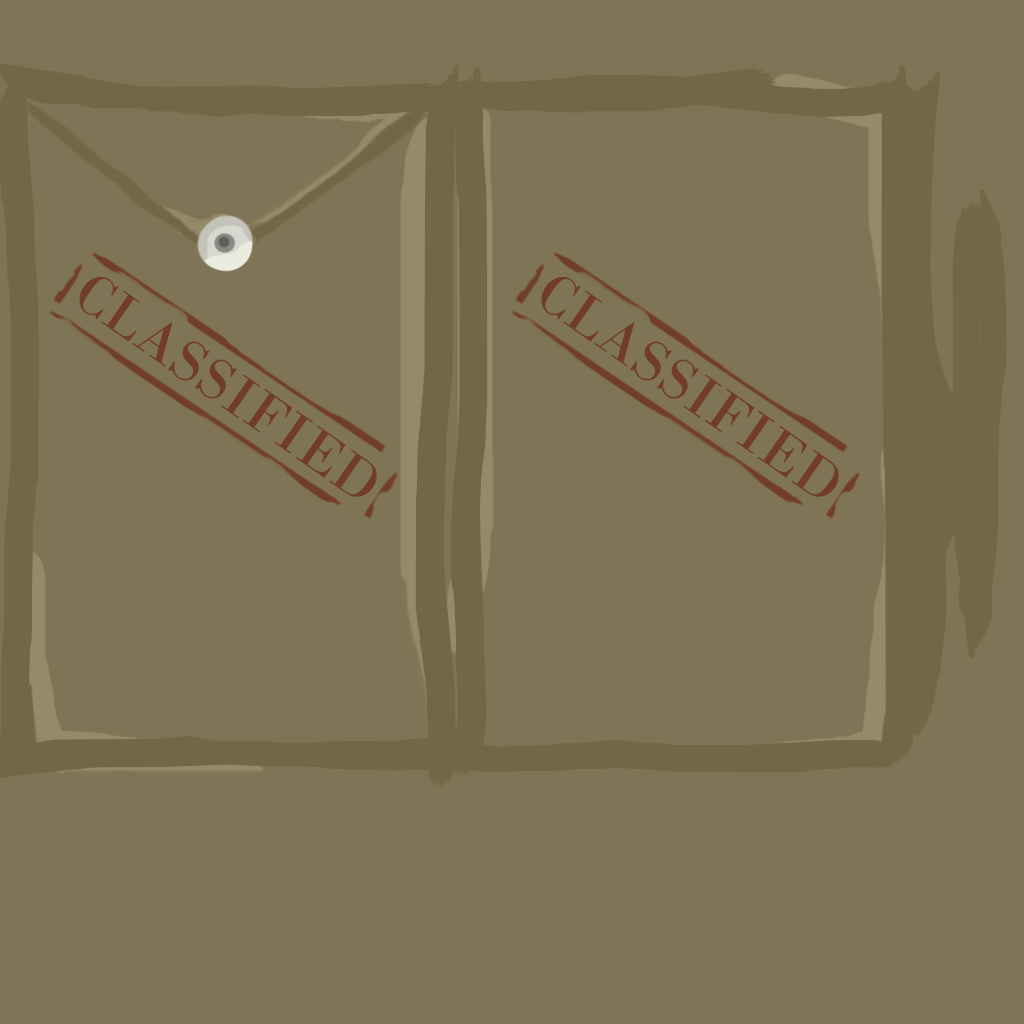
<style>
.page{position:relative;width:1024px;height:1024px;background:#7f7556}
.page>*{position:absolute;margin:0}
.t1{font:60px "BodoniMT";color:#713d26}
</style>
<div class="page">
<p class="t1" style="left:79px;top:277px;width:298px;height:220px;rotate:35deg">CLASSIFIED</p>
<p class="t1" style="left:541px;top:277px;width:298px;height:220px;rotate:35deg">CLASSIFIED</p>
</div>
